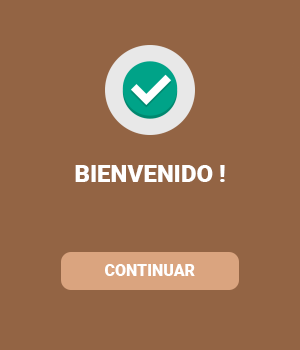
<style>
.page{position:relative;width:300px;height:350px;background:#936444}
.page>*{position:absolute;margin:0}
.t1{font:24px "Roboto-Black";color:#ffffff}
.t2{font:16px "Roboto-Black";color:#ffffff}
</style>
<div class="page">
<p class="t1" style="left:75px;top:165px;width:150px;height:17px">BIENVENIDO !</p>
<p class="t2" style="left:105px;top:264px;width:90px;height:12px">CONTINUAR</p>
</div>
